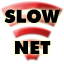
<style>
.page{position:relative;width:64px;height:64px;background:#ffffff}
.page>*{position:absolute;margin:0}
.t1{font:18.3px/0.9px "FuturaBT-ExtraBlack";color:#000000}
</style>
<div class="page">
<p class="t1" style="left:4px;top:9px;width:56px;height:45px;text-align:center">SLOW<br><br>NET</p>
</div>
